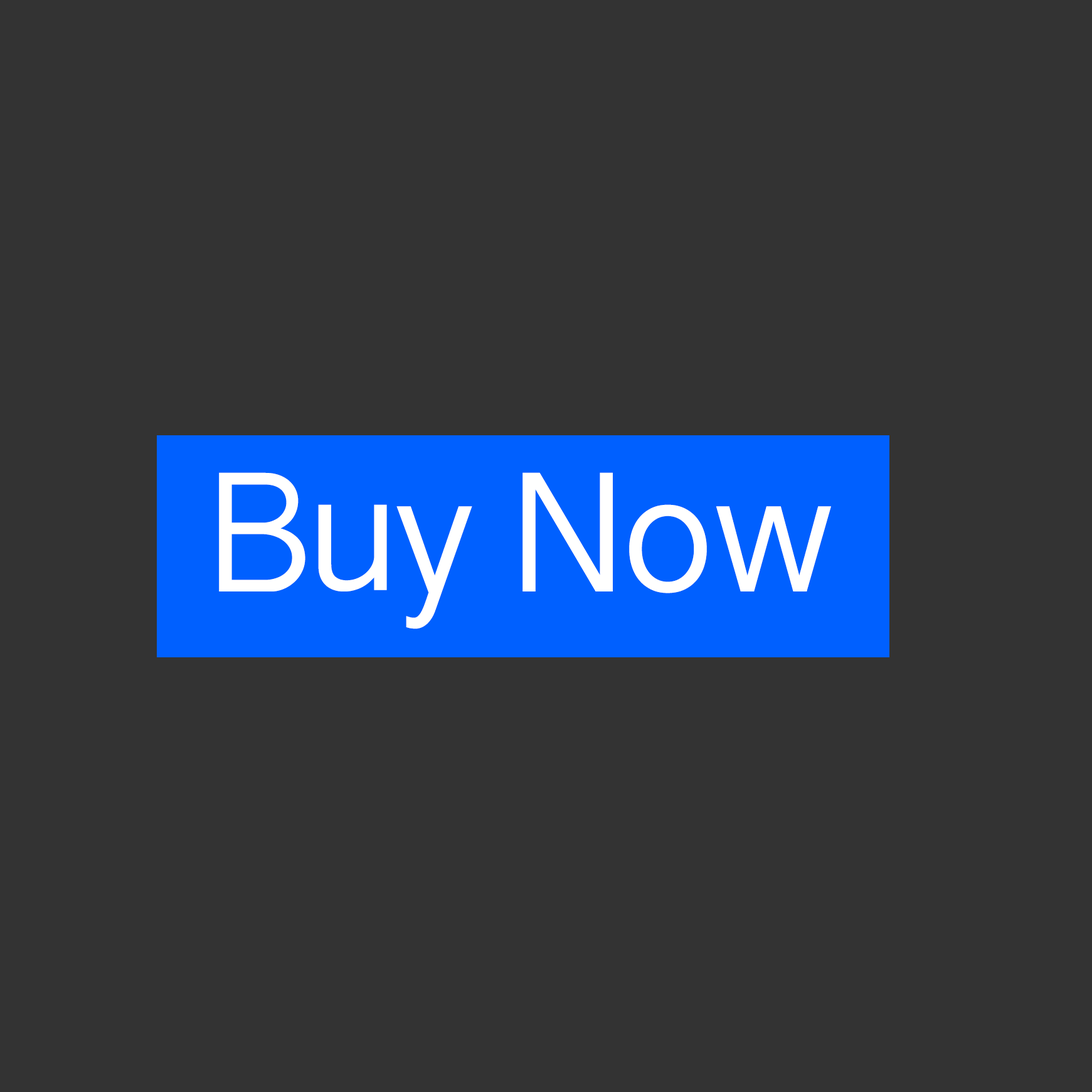
<style>
.page{position:relative;width:1092px;height:1092px;background:#333333}
.page>*{position:absolute;margin:0}
.t1{font:156.8px "SinhalaSangamMN";color:#ffffff}
</style>
<div class="page">
<p class="t1" style="left:219px;top:472px;width:612px;height:157px">Buy Now</p>
</div>
